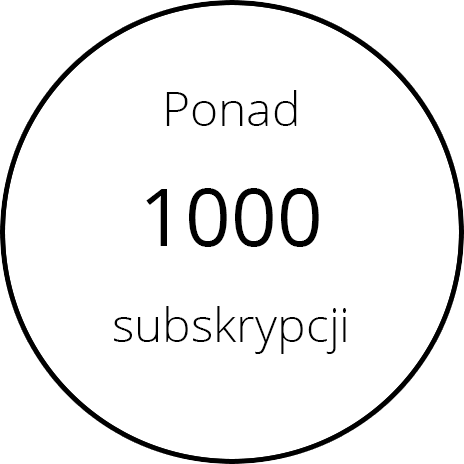
<style>
.page{position:relative;width:464px;height:464px;background:#ffffff}
.page>*{position:absolute;margin:0}
.t1{font:48px/24px "OpenSans-Light";color:#000000}
.t2{font:80px/24px "OpenSans";color:#000000}
</style>
<div class="page">
<p class="t1" style="left:114px;top:90px;width:232px;height:264px;text-align:center">Ponad <br><br><br><br><br><span class="t2">1000<br></span><br><br><br>subskrypcji</p>
</div>
